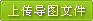
<style>
.page{position:relative;width:93px;height:21px}
.page>*{position:absolute;margin:0}
.t1{font:12px "SimSun";letter-spacing:0.1em;color:#ffffff}
</style>
<div class="page">
<p class="t1" style="left:8px;top:5px;width:77px;height:11px">上传导图文件</p>
</div>
